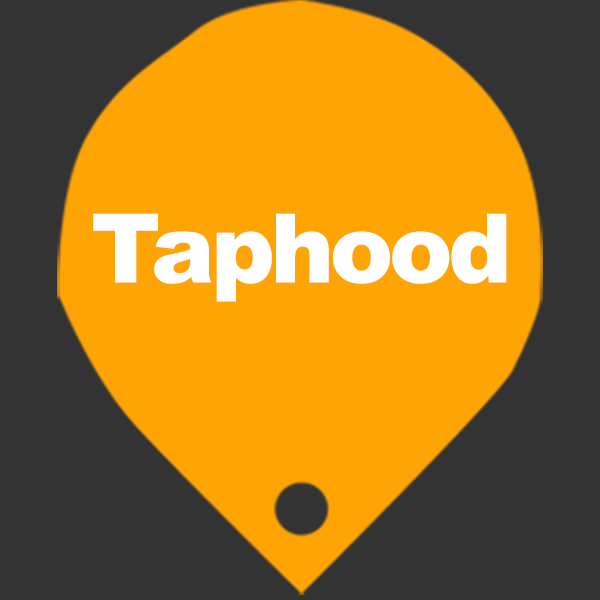
<style>
.page{position:relative;width:600px;height:600px;background:#fea505}
.page>*{position:absolute;margin:0}
.t1{font:96px "Arial-Black";letter-spacing:-0.05em;color:#ffffff}
</style>
<div class="page">
<p class="t1" style="left:93px;top:213px;width:414px;height:89px">Taphood</p>
</div>
